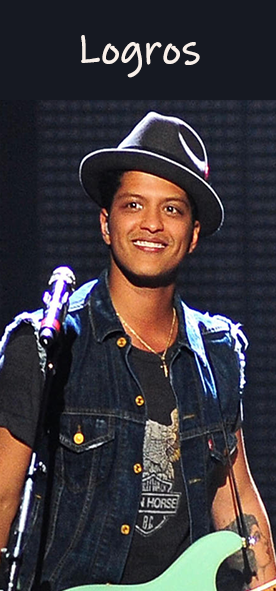
<style>
.page{position:relative;width:276px;height:591px}
.page>*{position:absolute;margin:0}
.t1{font:41.7px "InkFree";color:#f9f0ea;font-weight:bold}
</style>
<div class="page">
<p class="t1" style="left:81px;top:35px;width:119px;height:43px">Logros</p>
</div>
